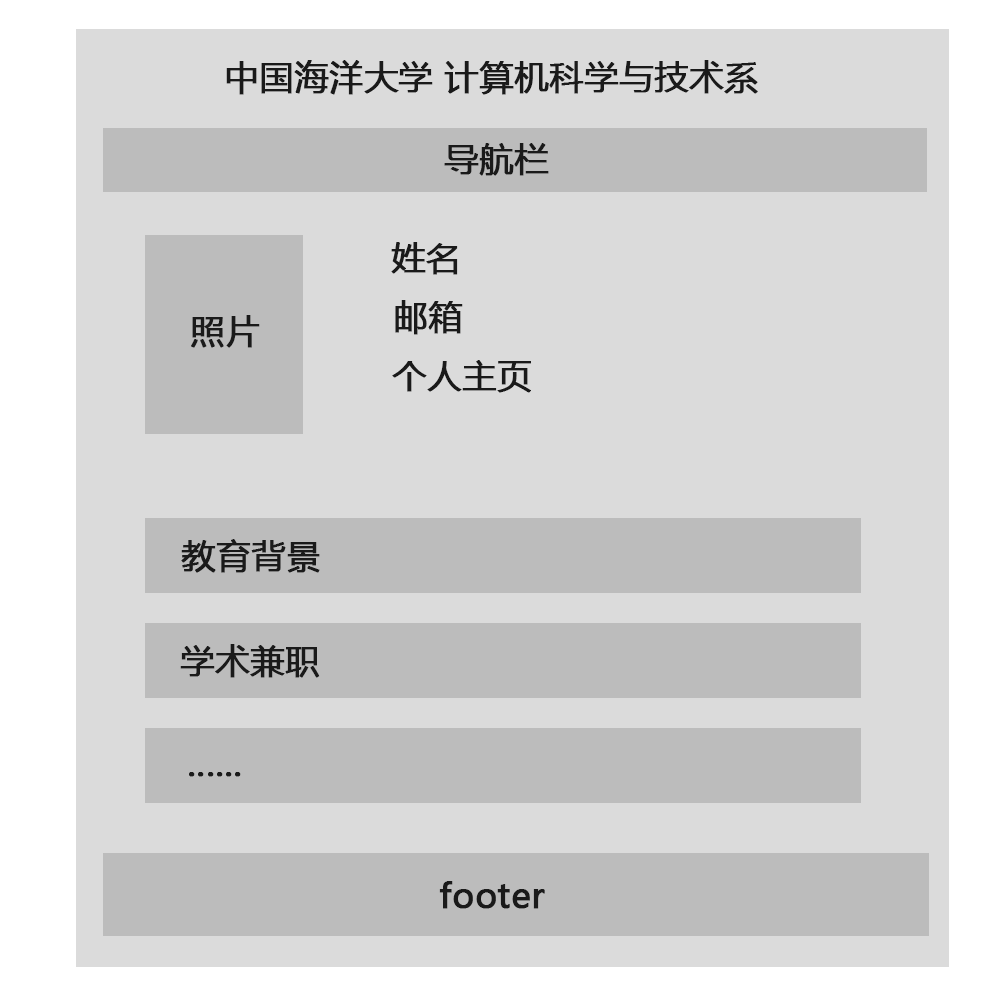
<style>
.page{position:relative;width:1000px;height:1000px;background:#dbdbdb}
.page>*{position:absolute;margin:0}
.t1{font:34px "MicrosoftYaHei";color:#1a1a1a;font-weight:bold}
</style>
<div class="page">
<p class="t1" style="left:226px;top:60px;width:532px;height:35px">中国海洋大学 计算机科学与技术系</p>
<p class="t1" style="left:444px;top:143px;width:105px;height:33px">导航栏</p>
<p class="t1" style="left:391px;top:242px;width:67px;height:33px">姓名</p>
<p class="t1" style="left:395px;top:300px;width:68px;height:35px">邮箱</p>
<p class="t1" style="left:191px;top:315px;width:69px;height:33px">照片</p>
<p class="t1" style="left:392px;top:360px;width:139px;height:33px">个人主页</p>
<p class="t1" style="left:181px;top:539px;width:139px;height:34px">教育背景</p>
<p class="t1" style="left:180px;top:644px;width:140px;height:34px">学术兼职</p>
<p class="t1" style="left:189px;top:772px;width:52px;height:5px">......</p>
<p class="t1" style="left:439px;top:881px;width:106px;height:28px">footer</p>
</div>
